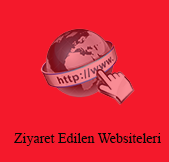
<style>
.page{position:relative;width:169px;height:162px;background:#f4192b}
.page>*{position:absolute;margin:0}
.t1{font:14px "TimesNewRomanPSMT";color:#060606}
</style>
<div class="page">
<p class="t1" style="left:14px;top:133px;width:147px;height:13px">Ziyaret Edilen Websiteleri</p>
</div>
